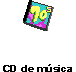
<style>
.page{position:relative;width:76px;height:72px;background:#ffffff}
.page>*{position:absolute;margin:0}
.t1{font:10.3px "Arial-BoldMT";color:#000000;scale:1.11 1}
</style>
<div class="page">
<p class="t1" style="left:3px;top:64px;width:69px;height:8px">CD de música</p>
</div>
